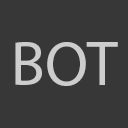
<style>
.page{position:relative;width:128px;height:128px;background:#373737}
.page>*{position:absolute;margin:0}
.t1{font:62.5px "MyriadPro-Regular";color:#cdcdcd}
</style>
<div class="page">
<p class="t1" style="left:15px;top:42px;width:103px;height:44px">BOT</p>
</div>
